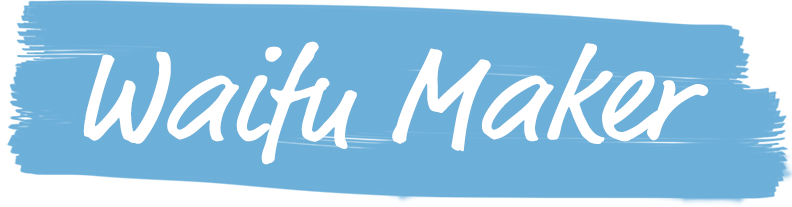
<style>
.page{position:relative;width:792px;height:207px;background:#6cafd9}
.page>*{position:absolute;margin:0}
.t1{font:131.5px "MarketOT";color:#ffffff;scale:1.05 1}
</style>
<div class="page">
<p class="t1" style="left:83px;top:41px;width:626px;height:124px">Waifu Maker</p>
</div>
